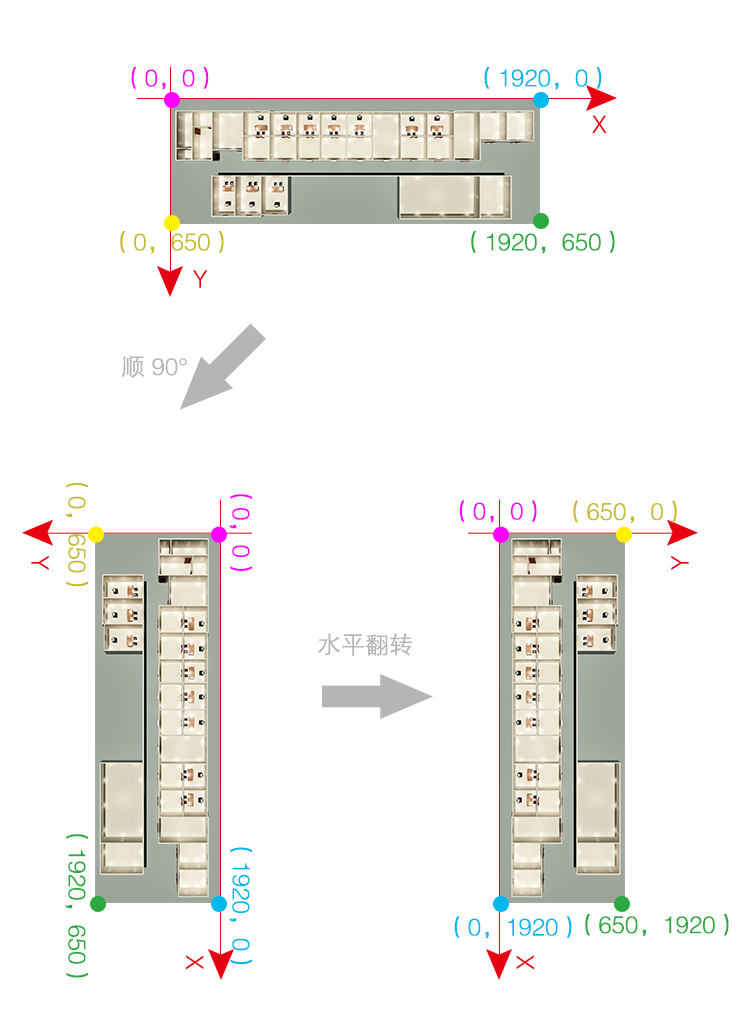
<style>
.page{position:relative;width:738px;height:1019px;background:#ffffff}
.page>*{position:absolute;margin:0}
.t1{font:24px "FZZDXK--GBK1-0";color:#ff00ff}
.t2{font:24px "FZZDXK--GBK1-0";color:#00b8ec}
.t3{font:24px "FZZDXK--GBK1-0";color:#e60012}
.t4{font:24px "FZZDXK--GBK1-0";color:#c5bb2d}
.t5{font:24px "FZZDXK--GBK1-0";color:#2baa3f}
.t6{font:24px "FZZDXK--GBK1-0";color:#b5b5b5}
</style>
<div class="page">
<p class="t1" style="left:131px;top:67px;width:78px;height:23px">（0，0）</p>
<p class="t2" style="left:484px;top:67px;width:118px;height:23px">（1920，0）</p>
<p class="t3" style="left:592px;top:115px;width:15px;height:18px">X</p>
<p class="t4" style="left:120px;top:231px;width:104px;height:23px">（0，650）</p>
<p class="t5" style="left:471px;top:231px;width:144px;height:23px">（1920，650）</p>
<p class="t3" style="left:193px;top:270px;width:15px;height:18px">Y</p>
<p class="t6" style="left:121px;top:355px;width:66px;height:23px">顺 90°</p>
<p class="t4" style="left:65px;top:482px;width:23px;height:105px;rotate:90deg">（0，650）</p>
<p class="t1" style="left:229px;top:494px;width:23px;height:77px;rotate:90deg">（0，0）</p>
<p class="t1" style="left:459px;top:500px;width:78px;height:23px">（0，0）</p>
<p class="t4" style="left:573px;top:500px;width:104px;height:24px">（650，0）</p>
<p class="t3" style="left:31px;top:555px;width:18px;height:15px;rotate:90deg">Y</p>
<p class="t3" style="left:671px;top:555px;width:18px;height:15px;rotate:90deg">Y</p>
<p class="t6" style="left:318px;top:633px;width:94px;height:23px">水平翻转</p>
<p class="t5" style="left:65px;top:834px;width:23px;height:144px;rotate:90deg">（1920，650）</p>
<p class="t2" style="left:229px;top:847px;width:23px;height:118px;rotate:90deg">（1920，0）</p>
<p class="t2" style="left:454px;top:916px;width:118px;height:23px">（0，1920）</p>
<p class="t5" style="left:585px;top:914px;width:144px;height:23px">（650，1920）</p>
<p class="t3" style="left:186px;top:955px;width:18px;height:15px;rotate:90deg">X</p>
<p class="t3" style="left:516px;top:955px;width:18px;height:15px;rotate:90deg">X</p>
</div>
